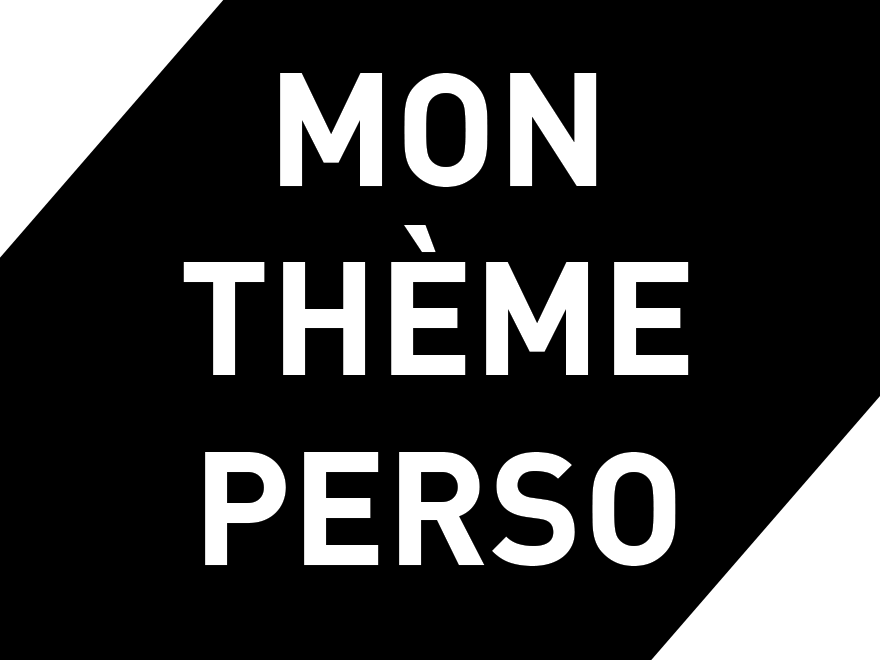
<style>
.page{position:relative;width:880px;height:660px;background:#000000}
.page>*{position:absolute;margin:0}
.t1{font:157.8px "DIN-Bold";color:#ffffff;text-transform:uppercase}
</style>
<div class="page">
<p class="t1" style="left:183px;top:73px;width:506px;height:493px;text-align:center">mon<br>thème<br>perso</p>
</div>
